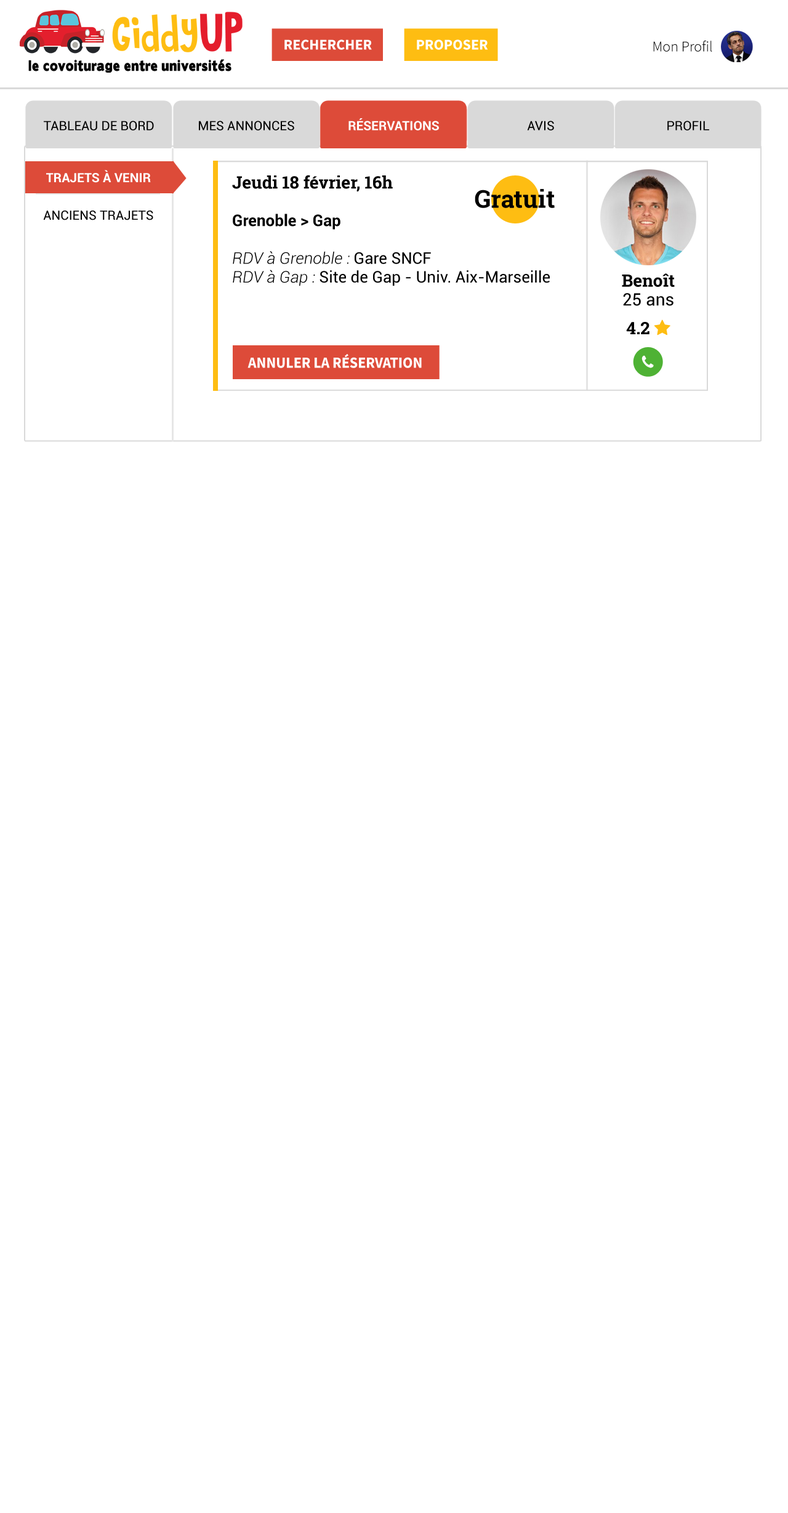
<style>
.page{position:relative;width:788px;height:1513px;background:#ffffff}
.page>*{position:absolute;margin:0}
.t1{font:14.8px "SourceSansPro-Bold";color:#ffffff;text-transform:uppercase}
.t2{font:14.8px "SourceSansPro-Light";color:#000000}
.t3{font:12.9px "Roboto-Regular";color:#000000;text-transform:uppercase}
.t4{font:12.9px "Roboto-Bold";color:#ffffff;text-transform:uppercase}
.t5{font:12.9px/18.8px "Roboto-Bold";color:#ffffff;text-transform:uppercase}
.t6{font:12.9px/18.8px "Roboto-Regular";color:#000000;text-transform:uppercase}
.t7{font:16px/18.8px "Roboto-Regular";color:#000000}
.t8{font:17.2px/18.8px "RobotoSlab-Bold";color:#000000}
.t9{font:17.2px/18.8px "Roboto-Regular";color:#000000}
.t10{font:16px/18.8px "Roboto-Bold";color:#000000}
.t11{font:16px/18.8px "Roboto-Medium";color:#000000}
.t12{font:16px/18.8px "Roboto-LightItalic";color:#000000}
.t13{font:24.6px "RobotoSlab-Bold";color:#000000}
.t14{font:15.5px "SourceSansPro-Bold";color:#ffffff;text-transform:uppercase;scale:0.95 1}
</style>
<div class="page">
<p class="t1" style="left:284px;top:39px;width:88px;height:11px">Rechercher</p>
<p class="t1" style="left:417px;top:39px;width:71px;height:11px">proposer</p>
<p class="t2" style="left:653px;top:41px;width:59px;height:11px">Mon Profil</p>
<p class="t3" style="left:44px;top:121px;width:110px;height:10px">tableau de bord</p>
<p class="t3" style="left:199px;top:121px;width:95px;height:10px">mes annonces</p>
<p class="t4" style="left:348px;top:118px;width:91px;height:13px">réservations</p>
<p class="t3" style="left:527px;top:121px;width:27px;height:10px">avis</p>
<p class="t3" style="left:667px;top:121px;width:42px;height:10px">profil</p>
<p class="t5" style="left:43px;top:170px;width:110px;height:50px;text-align:center">trajets à venir<br><span class="t6"><br>anciens trajets</span></p>
<p class="t7" style="left:232px;top:175px;width:318px;height:111px"><span class="t8">Jeudi 18 février, 16h<br></span><span class="t9"><br></span><span class="t10">Grenoble &gt; Gap<br></span><span class="t11"><br></span><span class="t12">RDV à Grenoble : </span>Gare SNCF<br><span class="t12">RDV à Gap : </span>Site de Gap - Univ. Aix-Marseille</p>
<p class="t13" style="left:475px;top:189px;width:80px;height:19px">Gratuit</p>
<p class="t8" style="left:622px;top:273px;width:53px;height:33px;text-align:center">Benoît<br><span class="t9">25 ans</span></p>
<p class="t14" style="left:247px;top:354px;width:175px;height:14px">ANNULER La réservation</p>
</div>
